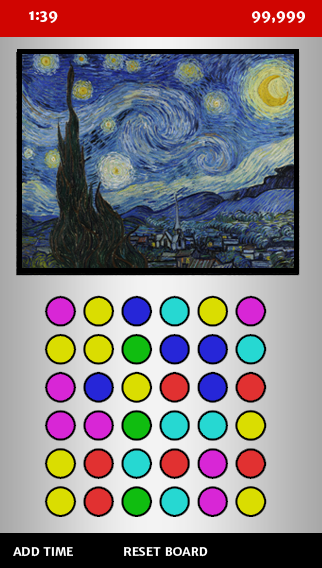
<style>
.page{position:relative;width:322px;height:568px}
.page>*{position:absolute;margin:0}
.t1{font:14px "MerriweatherSans-ExtraBold";color:#ffffff}
.t2{font:12px "MerriweatherSans-Bold";color:#ffffff}
</style>
<div class="page">
<p class="t1" style="left:29px;top:11px;width:29px;height:12px">1:39</p>
<p class="t1" style="left:252px;top:11px;width:53px;height:12px">99,999</p>
<p class="t2" style="left:13px;top:547px;width:60px;height:10px">ADD TIME</p>
<p class="t2" style="left:124px;top:547px;width:84px;height:10px">RESET BOARD</p>
</div>
